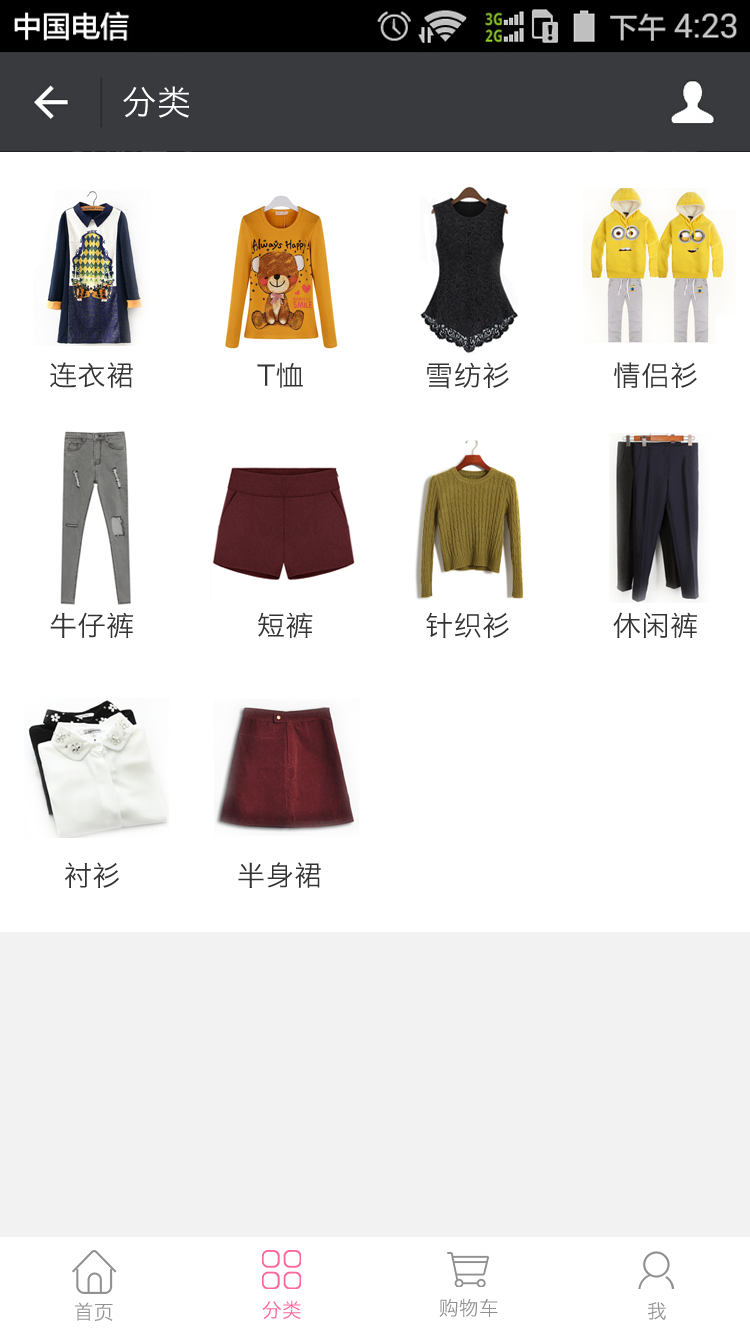
<style>
.page{position:relative;width:750px;height:1334px;background:#ffffff}
.page>*{position:absolute;margin:0}
.t1{font:34px "HiraginoSansGB-W3";letter-spacing:0.022em;color:#ffffff}
.t2{font:28px "HiraginoSansGB-W3";letter-spacing:0.022em;color:#333333}
.t3{font:20px "HiraginoSansGB-W3";color:#929192}
.t4{font:20px "HiraginoSansGB-W3";color:#ff6699}
</style>
<div class="page">
<p class="t1" style="left:123px;top:86px;width:66px;height:32px">分类</p>
<p class="t2" style="left:50px;top:362px;width:83px;height:26px">连衣裙</p>
<p class="t2" style="left:257px;top:362px;width:46px;height:26px">T恤</p>
<p class="t2" style="left:427px;top:362px;width:82px;height:27px">雪纺衫</p>
<p class="t2" style="left:614px;top:362px;width:83px;height:26px">情侣衫</p>
<p class="t2" style="left:50px;top:612px;width:83px;height:26px">牛仔裤</p>
<p class="t2" style="left:258px;top:612px;width:55px;height:26px">短裤</p>
<p class="t2" style="left:426px;top:612px;width:83px;height:26px">针织衫</p>
<p class="t2" style="left:613px;top:612px;width:84px;height:26px">休闲裤</p>
<p class="t2" style="left:65px;top:862px;width:54px;height:26px">衬衫</p>
<p class="t2" style="left:238px;top:862px;width:83px;height:26px">半身裙</p>
<p class="t3" style="left:75px;top:1302px;width:38px;height:19px">首页</p>
<p class="t4" style="left:262px;top:1300px;width:39px;height:19px">分类</p>
<p class="t3" style="left:439px;top:1298px;width:59px;height:19px">购物车</p>
<p class="t3" style="left:648px;top:1302px;width:18px;height:18px">我</p>
</div>
